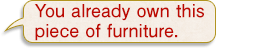
<style>
.page{position:relative;width:267px;height:48px;background:#ffffff}
.page>*{position:absolute;margin:0}
.t1{font:18px/20px "FutoGoB101Pr5-Bold";color:#bd0800}
</style>
<div class="page">
<p class="t1" style="left:34px;top:4px;width:170px;height:37px">You already own this<br>piece of furniture.</p>
</div>
